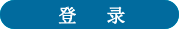
<style>
.page{position:relative;width:180px;height:30px;background:#016b9e}
.page>*{position:absolute;margin:0}
.t1{font:18.7px "SimSun";color:#fcfdfe;font-weight:bold}
</style>
<div class="page">
<p class="t1" style="left:58px;top:6px;width:67px;height:18px">登   录</p>
</div>
